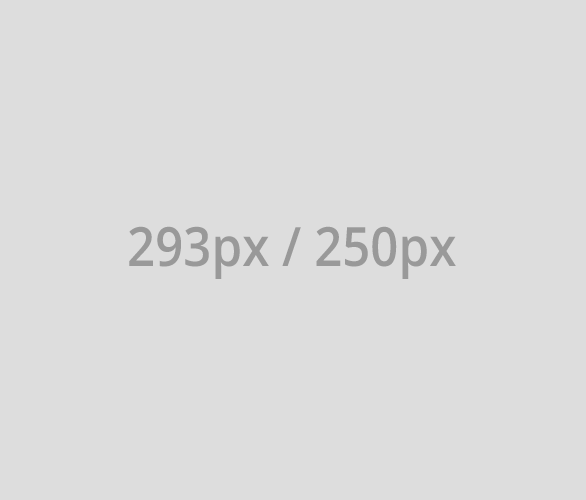
<style>
.page{position:relative;width:586px;height:500px;background:#dddddd}
.page>*{position:absolute;margin:0}
.t1{font:54.2px "OpenSans-Semibold";color:#999999;scale:0.91 1}
</style>
<div class="page">
<p class="t1" style="left:129px;top:226px;width:327px;height:53px">293px / 250px</p>
</div>
